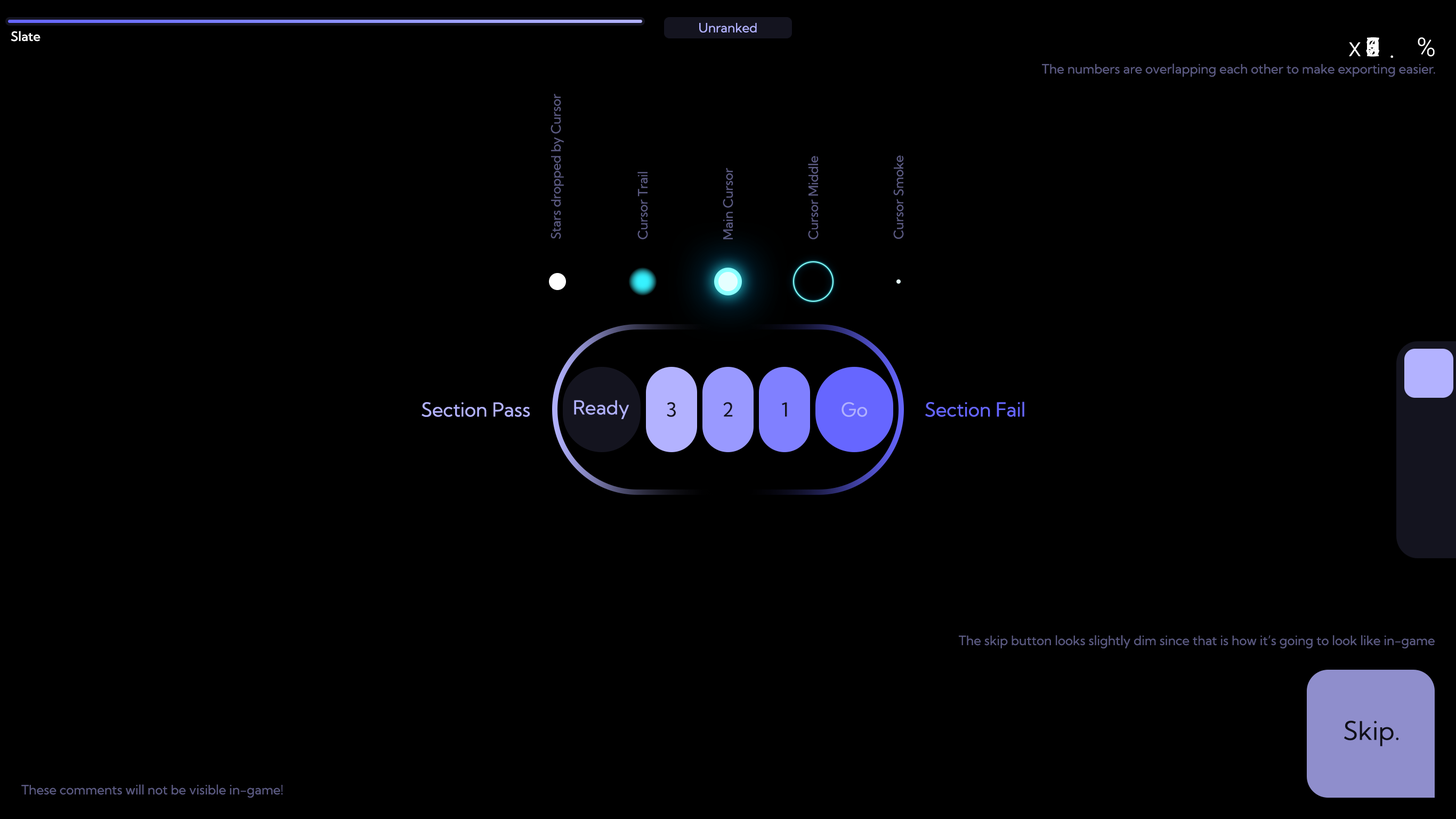
<style>
.page{position:relative;width:1456px;height:819px;background:#000000}
.page>*{position:absolute;margin:0}
.t1{font:12.8px "KumbhSans-Regular";color:#b2b2ff}
.t2{font:12.8px "KumbhSans-Medium";color:#ffffff}
.t3{font:25.6px "Roboto-Light";color:#ffffff}
.t4{font:12.8px "KumbhSans-Regular";color:#5a5980}
.t5{font:19.2px "KumbhSans-Regular";color:#b3b2ff}
.t6{font:19.2px "KumbhSans-Regular";color:#b1b1fd}
.t7{font:19.2px "KumbhSans-Regular";color:#14141f}
.t8{font:19.2px "KumbhSans-Regular";color:#6666ff}
.t9{font:25.6px "KumbhSans-Regular";color:#14141f}
</style>
<div class="page">
<p class="t1" style="left:699px;top:23px;width:58px;height:10px">Unranked</p>
<p class="t2" style="left:11px;top:31px;width:30px;height:11px">Slate</p>
<p class="t3" style="left:1367px;top:37px;width:12px;height:20px">8</p>
<p class="t3" style="left:1418px;top:37px;width:17px;height:20px">%</p>
<p class="t3" style="left:1349px;top:42px;width:12px;height:15px">x</p>
<p class="t4" style="left:1042px;top:63px;width:394px;height:14px">The numbers are overlapping each other to make exporting easier.</p>
<p class="t3" style="left:1391px;top:55px;width:2px;height:3px">.</p>
<p class="t3" style="left:1391px;top:55px;width:2px;height:3px">.</p>
<p class="t4" style="left:551px;top:94px;width:13px;height:145px;rotate:-90deg">Stars dropped by Cursor</p>
<p class="t4" style="left:808px;top:156px;width:11px;height:83px;rotate:-90deg">Cursor Middle</p>
<p class="t4" style="left:893px;top:155px;width:11px;height:84px;rotate:-90deg">Cursor Smoke</p>
<p class="t4" style="left:638px;top:172px;width:10px;height:67px;rotate:-90deg">Cursor Trail</p>
<p class="t4" style="left:723px;top:168px;width:10px;height:71px;rotate:-90deg">Main Cursor</p>
<p class="t5" style="left:422px;top:402px;width:108px;height:15px">Section Pass</p>
<p class="t6" style="left:574px;top:400px;width:56px;height:19px">Ready</p>
<p class="t7" style="left:667px;top:402px;width:9px;height:15px">3</p>
<p class="t7" style="left:723px;top:402px;width:10px;height:15px">2</p>
<p class="t7" style="left:782px;top:402px;width:5px;height:15px">1</p>
<p class="t6" style="left:842px;top:402px;width:25px;height:15px">Go</p>
<p class="t8" style="left:925px;top:401px;width:100px;height:16px">Section Fail</p>
<p class="t4" style="left:959px;top:635px;width:476px;height:13px">The skip button looks slightly dim since that is how it’s going to look like in-game</p>
<p class="t9" style="left:1344px;top:720px;width:55px;height:26px">Skip.</p>
<p class="t4" style="left:21px;top:784px;width:262px;height:13px">These comments will not be visible in-game!</p>
</div>
